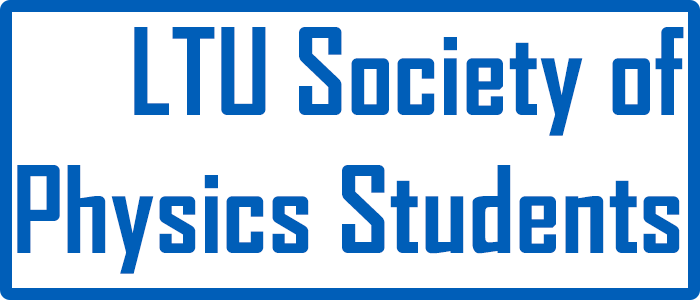
<style>
.page{position:relative;width:700px;height:300px;background:#ffffff}
.page>*{position:absolute;margin:0}
.t1{font:115px "AgencyFB-Bold";color:#005eb8}
</style>
<div class="page">
<p class="t1" style="left:17px;top:27px;width:667px;height:247px;text-align:right">LTU Society of<br>Physics Students</p>
</div>
